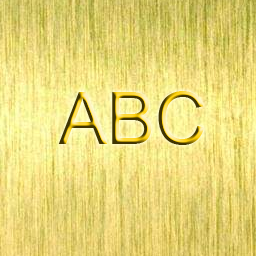
<style>
.page{position:relative;width:256px;height:256px}
.page>*{position:absolute;margin:0}
.t1{font:72px "ArialMT"}
</style>
<div class="page">
<p class="t1" style="left:58px;top:91px;width:147px;height:54px">ABC</p>
</div>
